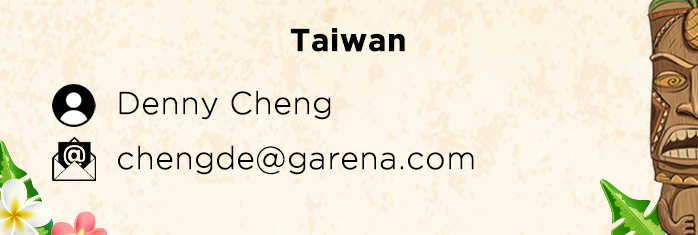
<style>
.page{position:relative;width:698px;height:235px;background:#fef7e9}
.page>*{position:absolute;margin:0}
.t1{font:31.3px "Gotham-Bold";color:#000000;font-weight:bold}
.t2{font:31.3px "Gotham-Light";color:#000000;font-weight:bold}
</style>
<div class="page">
<p class="t1" style="left:290px;top:28px;width:115px;height:24px">Taiwan</p>
<p class="t2" style="left:119px;top:90px;width:212px;height:30px">Denny Cheng</p>
<p class="t2" style="left:118px;top:145px;width:356px;height:30px">chengde@garena.com</p>
</div>
